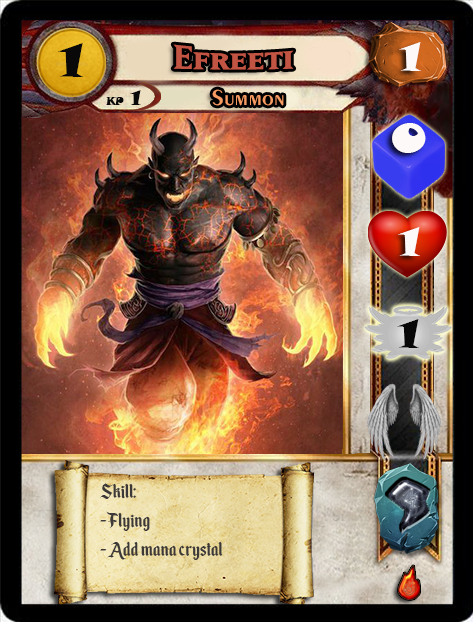
<style>
.page{position:relative;width:473px;height:622px}
.page>*{position:absolute;margin:0}
.t1{font:46.6px "SnapITC-Regular";color:#090909;scale:1.05 1}
.t2{font:40px "MatrixBoldSmallCaps";color:#c25443;scale:1.06 1}
.t3{font:40px "SnapITC-Regular";color:#fef9f9;scale:1.05 1}
.t4{font:22.7px "Exotic350BT-DemiBold";color:#f89c64;scale:1.06 1}
.t5{font:20.5px "SnapITC-Regular";color:#090909}
.t6{font:40px "SnapITC-Regular";color:#090909;scale:1.05 1}
.t7{font:24px "EnchantedLand";color:#3e3939}
</style>
<div class="page">
<p class="t1" style="left:58px;top:43px;width:25px;height:34px">1</p>
<p class="t2" style="left:173px;top:44px;width:121px;height:26px">Efreeti</p>
<p class="t3" style="left:399px;top:42px;width:22px;height:29px">1</p>
<p class="t4" style="left:212px;top:89px;width:72px;height:17px">Summon</p>
<p class="t5" style="left:130px;top:90px;width:11px;height:15px">1</p>
<p class="t3" style="left:392px;top:123px;width:34px;height:30px">0</p>
<p class="t3" style="left:398px;top:227px;width:22px;height:29px">1</p>
<p class="t6" style="left:397px;top:319px;width:22px;height:29px">1</p>
<p class="t7" style="left:100px;top:483px;width:123px;height:77px">Skill:<br>- Flying<br>- Add mana crystal</p>
</div>
